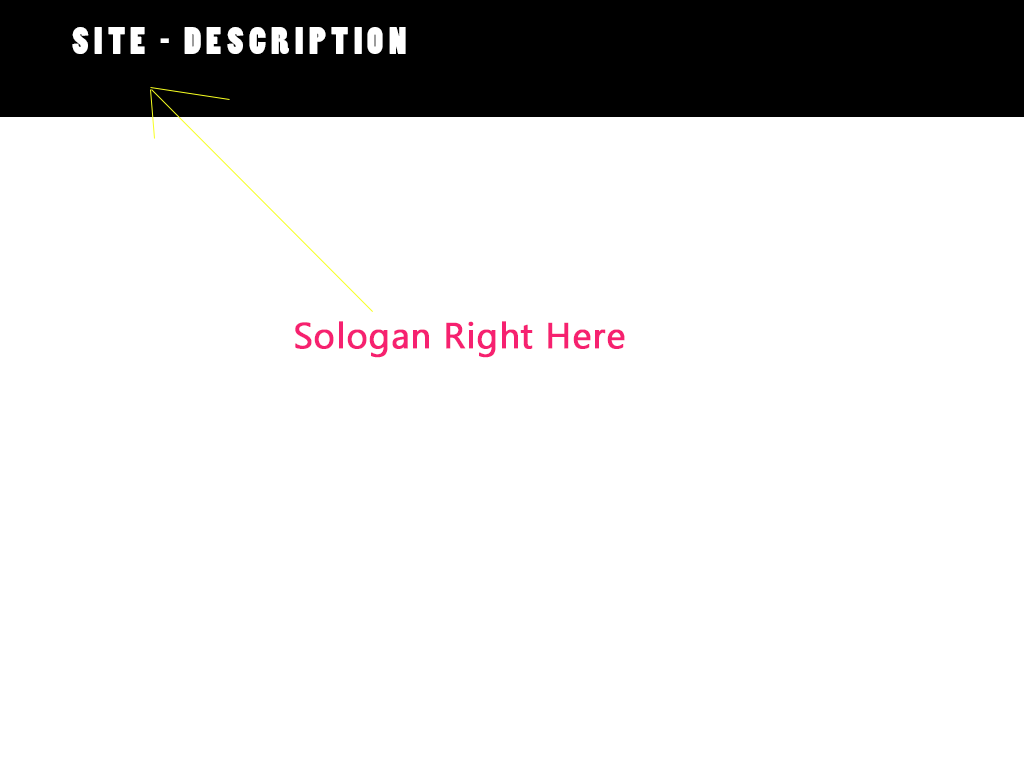
<style>
.page{position:relative;width:1024px;height:768px;background:#ffffff}
.page>*{position:absolute;margin:0}
.t1{font:36px "PoplarStd";letter-spacing:0.15em;color:#ffffff;text-transform:uppercase}
.t2{font:36px "SegoeUISymbol";letter-spacing:0.01em;color:#f62170;font-weight:bold}
</style>
<div class="page">
<p class="t1" style="left:72px;top:27px;width:334px;height:27px">Site - DESCRIPTION</p>
<p class="t2" style="left:295px;top:321px;width:330px;height:37px">Sologan Right Here</p>
</div>
